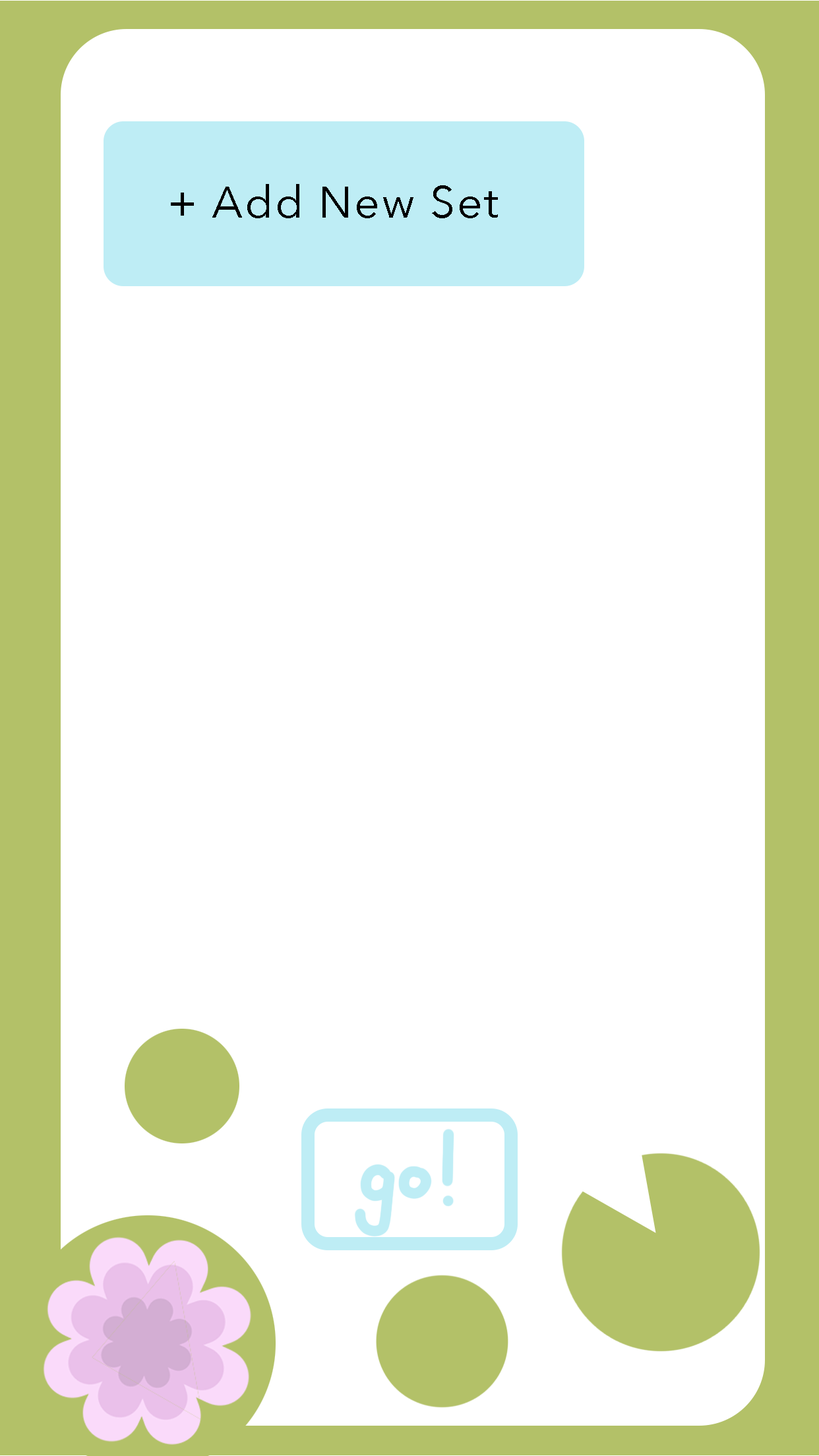
<style>
.page{position:relative;width:819px;height:1456px;background:#ffffff}
.page>*{position:absolute;margin:0}
.t1{font:44.1px "AvenirNext-Regular";letter-spacing:0.05em;color:#000000}
</style>
<div class="page">
<p class="t1" style="left:171px;top:184px;width:327px;height:34px">+ Add New Set</p>
</div>
